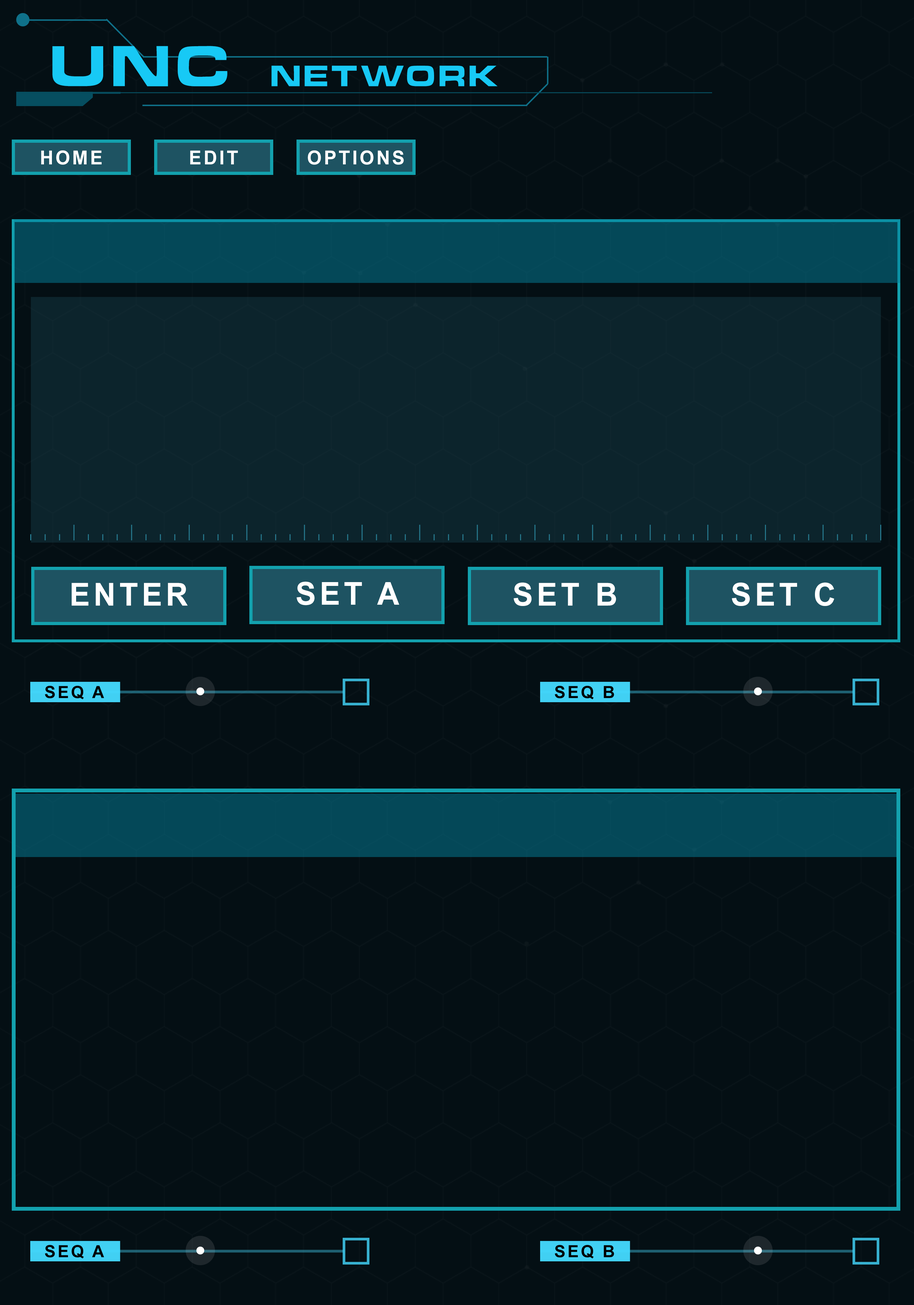
<style>
.page{position:relative;width:914px;height:1305px;background:#040f14}
.page>*{position:absolute;margin:0}
.t1{font:26.9px "ChinoCapsSSK";letter-spacing:0.12em;color:#17c9f5}
.t2{font:52.4px "ChinoCapsSSK";letter-spacing:0.12em;color:#17c9f5}
.t3{font:19.2px "Arial-BoldMT";letter-spacing:0.12em;color:#ffffff}
.t4{font:31.6px "Arial-BoldMT";letter-spacing:0.12em;color:#ffffff}
.t5{font:16.8px "Arial-BoldMT";letter-spacing:0.12em;color:#000000}
</style>
<div class="page">
<p class="t1" style="left:52px;top:46px;width:445px;height:40px"><span class="t2">UNC </span>NETWORK</p>
<p class="t3" style="left:41px;top:150px;width:61px;height:15px">HOME</p>
<p class="t3" style="left:190px;top:150px;width:48px;height:14px">EDIT</p>
<p class="t3" style="left:308px;top:150px;width:96px;height:15px">OPTIONS</p>
<p class="t4" style="left:297px;top:581px;width:102px;height:24px">SET A</p>
<p class="t4" style="left:72px;top:583px;width:116px;height:22px">ENTER</p>
<p class="t4" style="left:514px;top:582px;width:102px;height:24px">SET B</p>
<p class="t4" style="left:732px;top:582px;width:102px;height:24px">SET C</p>
<p class="t5" style="left:45px;top:685px;width:59px;height:14px">SEQ A</p>
<p class="t5" style="left:555px;top:685px;width:59px;height:14px">SEQ B</p>
<p class="t5" style="left:45px;top:1244px;width:59px;height:14px">SEQ A</p>
<p class="t5" style="left:555px;top:1244px;width:59px;height:14px">SEQ B</p>
</div>
